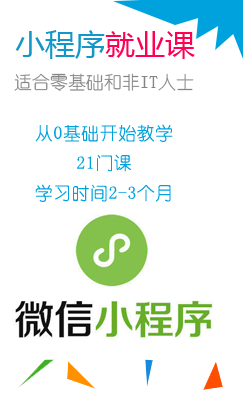
<style>
.page{position:relative;width:244px;height:400px;background:#ffffff}
.page>*{position:absolute;margin:0}
.t1{font:30px "MicrosoftYaHei";color:#1497c7}
.t2{font:30px "MicrosoftYaHei";color:#ff0054}
.t3{font:18px "YouYuan";color:#858585}
.t4{font:18px/30px "YouYuan";letter-spacing:0.025em;color:#00a2dd}
</style>
<div class="page">
<p class="t1" style="left:15px;top:30px;width:180px;height:29px">小程序<span class="t2">就业课</span></p>
<p class="t3" style="left:14px;top:73px;width:180px;height:18px">适合零基础和非IT人士</p>
<p class="t4" style="left:35px;top:124px;width:138px;height:78px;text-align:center">从0基础开始教学<br>21门课<br>学习时间2-3个月</p>
</div>
